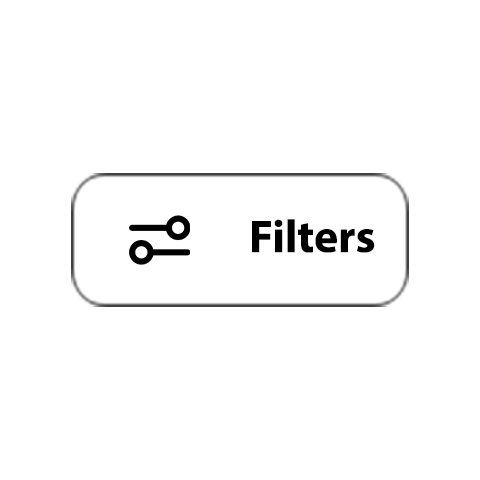
<style>
.page{position:relative;width:480px;height:480px;background:#ffffff}
.page>*{position:absolute;margin:0}
.t1{font:45.8px "MyriadPro-Bold";color:#000000}
</style>
<div class="page">
<p class="t1" style="left:252px;top:219px;width:123px;height:34px">Filters</p>
</div>
